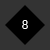
<style>
.page{position:relative;width:50px;height:50px;background:#333333}
.page>*{position:absolute;margin:0}
.t1{font:12px "ArialMT";color:#ffffff}
</style>
<div class="page">
<p class="t1" style="left:22px;top:20px;width:6px;height:9px">8</p>
</div>
